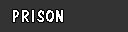
<style>
.page{position:relative;width:128px;height:32px;background:#333333}
.page>*{position:absolute;margin:0}
.t1{font:17.2px "DomCasualBT-Regular";letter-spacing:0.05em;color:#ffffff;scale:1.05 1}
</style>
<div class="page">
<p class="t1" style="left:13px;top:10px;width:50px;height:12px">PRISON</p>
</div>
